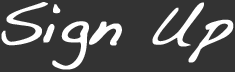
<style>
.page{position:relative;width:235px;height:72px;background:#333333}
.page>*{position:absolute;margin:0}
.t1{font:60px "Handwriting-Dakota";color:#ffffff;font-weight:bold}
</style>
<div class="page">
<p class="t1" style="left:1px;top:2px;width:233px;height:68px">Sign Up</p>
</div>
